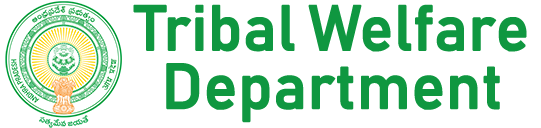
<style>
.page{position:relative;width:541px;height:128px;background:#ffffff}
.page>*{position:absolute;margin:0}
.t1{font:62.5px/58.3px "Bahnschrift";letter-spacing:-0.01em;color:#0f9740;font-weight:bold}
</style>
<div class="page">
<p class="t1" style="left:133px;top:4px;width:394px;height:119px;text-align:center">Tribal Welfare<br>Department</p>
</div>
